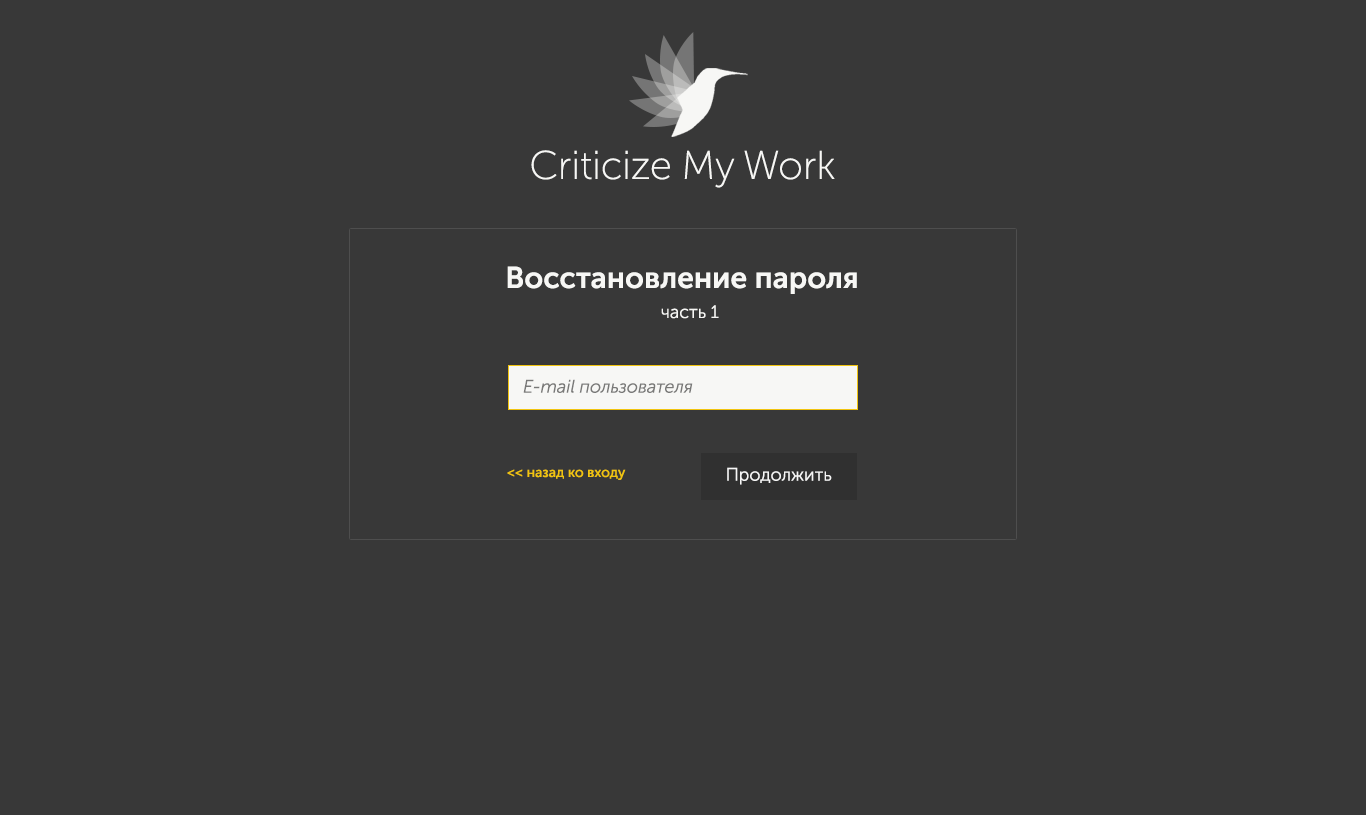
<style>
.page{position:relative;width:1366px;height:815px;background:#383838}
.page>*{position:absolute;margin:0}
.t1{font:40px "MuseoSansCyrl-100";color:#f7f7f5}
.t2{font:30px "MuseoSansCyrl-700";color:#f7f7f5}
.t3{font:18px "MuseoSansCyrl-300";color:#f7f7f5}
.t4{font:18px "MuseoSansCyrl-300Italic";color:#797978}
.t5{font:14px "MuseoSansCyrl-500";color:#f1c40f}
.t6{font:18px "MuseoSansCyrl-300";color:#f6f6f6}
</style>
<div class="page">
<p class="t1" style="left:531px;top:150px;width:304px;height:38px">Criticize My Work</p>
<p class="t2" style="left:507px;top:266px;width:350px;height:28px">Восстановление пароля</p>
<p class="t3" style="left:661px;top:305px;width:58px;height:14px">часть 1</p>
<p class="t4" style="left:523px;top:379px;width:170px;height:14px">E-mail пользователя</p>
<p class="t5" style="left:507px;top:469px;width:119px;height:11px">&lt;&lt; назад ко входу</p>
<p class="t6" style="left:727px;top:467px;width:105px;height:18px">Продолжить</p>
</div>
